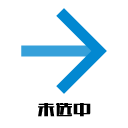
<style>
.page{position:relative;width:128px;height:128px;background:#ffffff}
.page>*{position:absolute;margin:0}
.t1{font:18px "FZCTHJW--GB1-0";color:#000000}
</style>
<div class="page">
<p class="t1" style="left:38px;top:103px;width:53px;height:14px">未选中</p>
</div>
